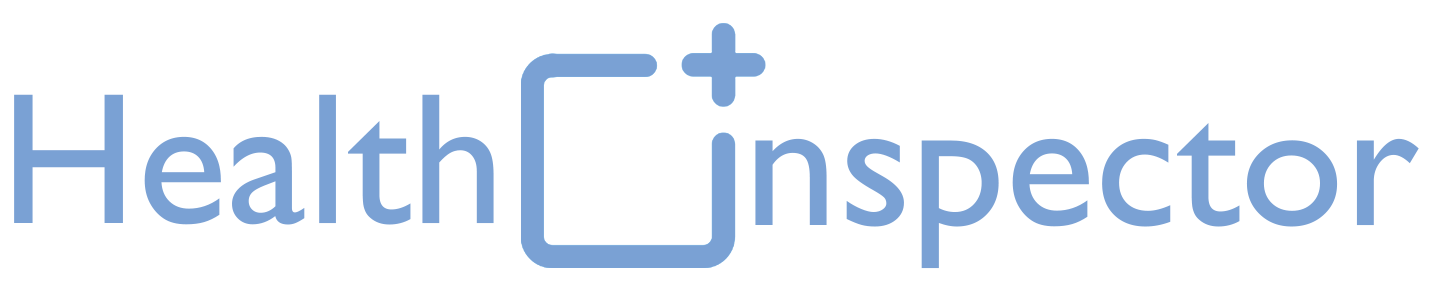
<style>
.page{position:relative;width:1442px;height:295px;background:#ffffff}
.page>*{position:absolute;margin:0}
.t1{font:188px "GillSansMT";color:#7aa1d4}
</style>
<div class="page">
<p class="t1" style="left:14px;top:94px;width:480px;height:131px">Health</p>
<p class="t1" style="left:755px;top:123px;width:664px;height:146px">nspector</p>
</div>
